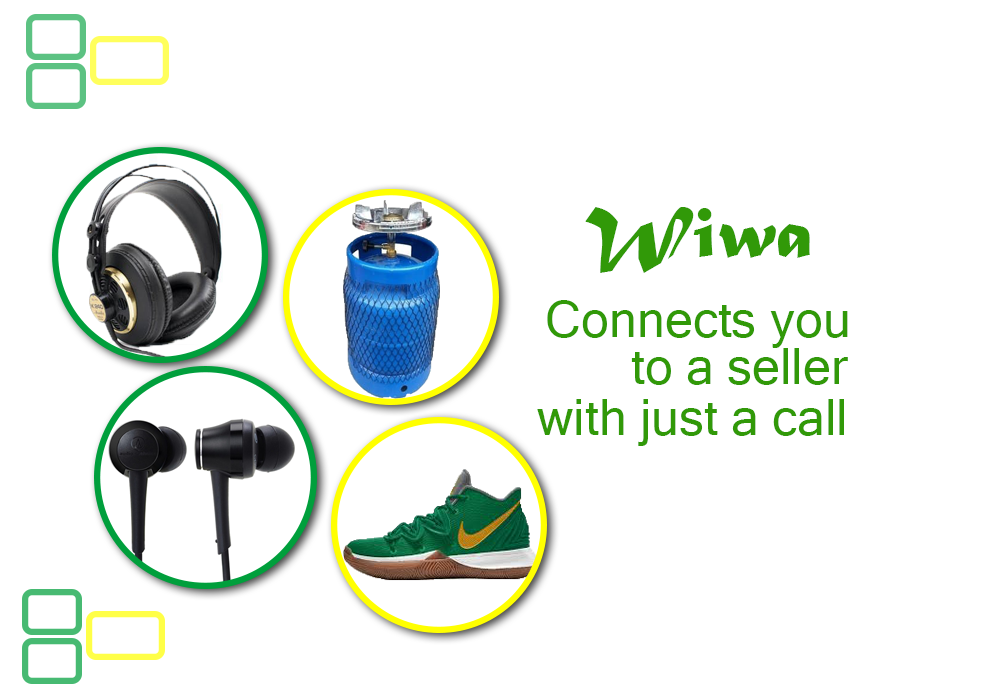
<style>
.page{position:relative;width:1000px;height:700px;background:#ffffff}
.page>*{position:absolute;margin:0}
.t1{font:75px "MaturaMTScriptCapitals";color:#319908}
.t2{font:50px "MicrosoftSansSerif";color:#319908}
</style>
<div class="page">
<p class="t1" style="left:585px;top:207px;width:225px;height:66px">Wiwa</p>
<p class="t2" style="left:547px;top:300px;width:301px;height:48px">Connects you</p>
<p class="t2" style="left:631px;top:348px;width:217px;height:37px">to a seller</p>
<p class="t2" style="left:537px;top:399px;width:307px;height:47px">with just a call</p>
</div>
